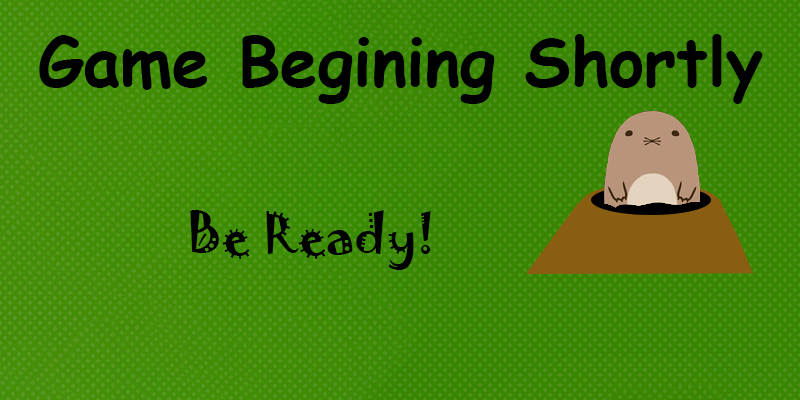
<style>
.page{position:relative;width:800px;height:400px;background:#388600}
.page>*{position:absolute;margin:0}
.t1{font:66.7px "ComicSansMS-Bold";color:#000000}
.t2{font:50px "Jokerman-Regular";color:#000000}
</style>
<div class="page">
<p class="t1" style="left:39px;top:34px;width:724px;height:70px">Game Begining Shortly</p>
<p class="t2" style="left:190px;top:210px;width:241px;height:60px">Be Ready!</p>
</div>
